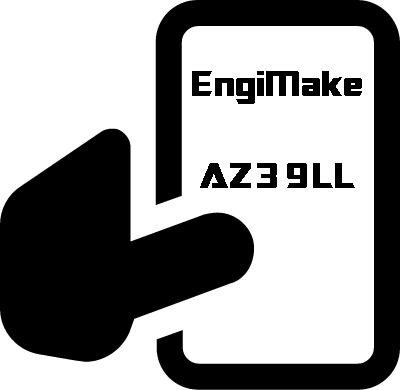
<style>
.page{position:relative;width:400px;height:390px;background:#ffffff}
.page>*{position:absolute;margin:0}
.t1{font:35px "SFTransRobotics";color:#000000}
</style>
<div class="page">
<p class="t1" style="left:192px;top:71px;width:170px;height:33px">EngiMake</p>
<p class="t1" style="left:200px;top:163px;width:155px;height:25px">AZ39LL</p>
</div>
